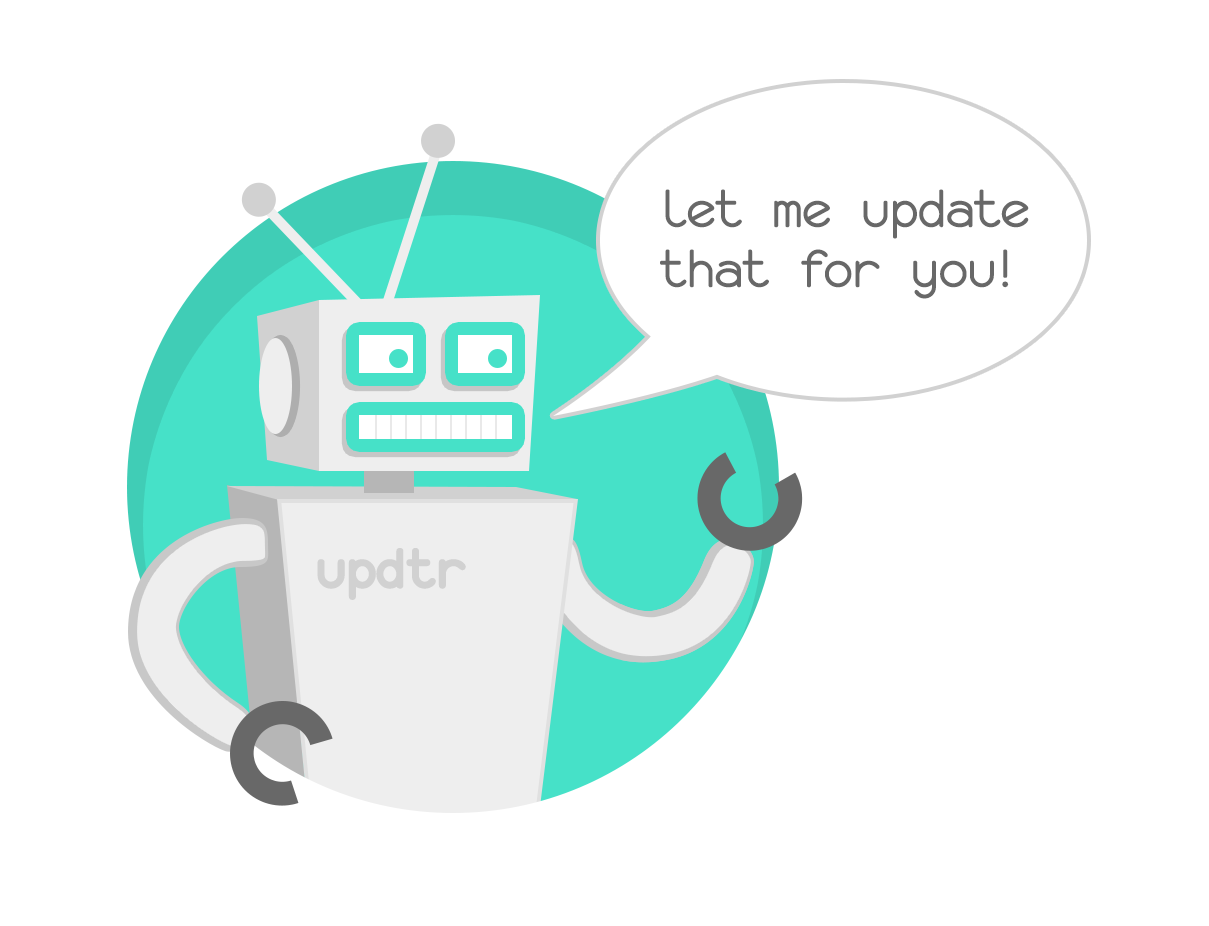
<style>
.page{position:relative;width:1209px;height:926px;background:#ffffff}
.page>*{position:absolute;margin:0}
.t1{font:60px/60px "MonofurForPowerline";letter-spacing:-0.01em;color:#686868}
.t2{font:60px "MonofurboldForPowerline";color:#d1d1d1}
</style>
<div class="page">
<p class="t1" style="left:660px;top:189px;width:369px;height:110px">let me update that for you!</p>
<p class="t2" style="left:317px;top:548px;width:149px;height:52px">updtr</p>
</div>
